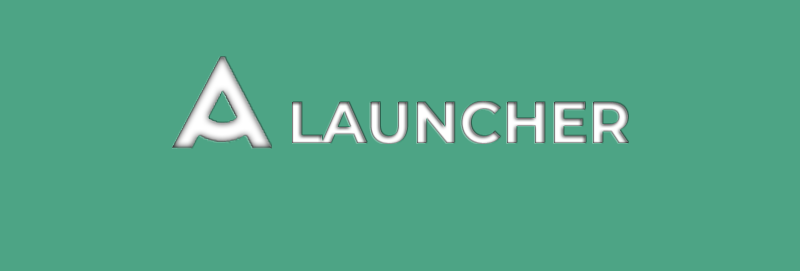
<style>
.page{position:relative;width:800px;height:271px;background:#4da485}
.page>*{position:absolute;margin:0}
.t1{font:58.3px "Montserrat-Bold"}
</style>
<div class="page">
<p class="t1" style="left:292px;top:101px;width:337px;height:43px">LAUNCHER</p>
</div>
